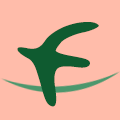
<style>
.page{position:relative;width:120px;height:120px;background:#ffbcaa}
.page>*{position:absolute;margin:0}
.t1{font:157.5px "HappyHand";color:#0f5b30}
</style>
<div class="page">
<p class="t1" style="left:17px;top:22px;width:82px;height:85px;rotate:14deg">f</p>
</div>
